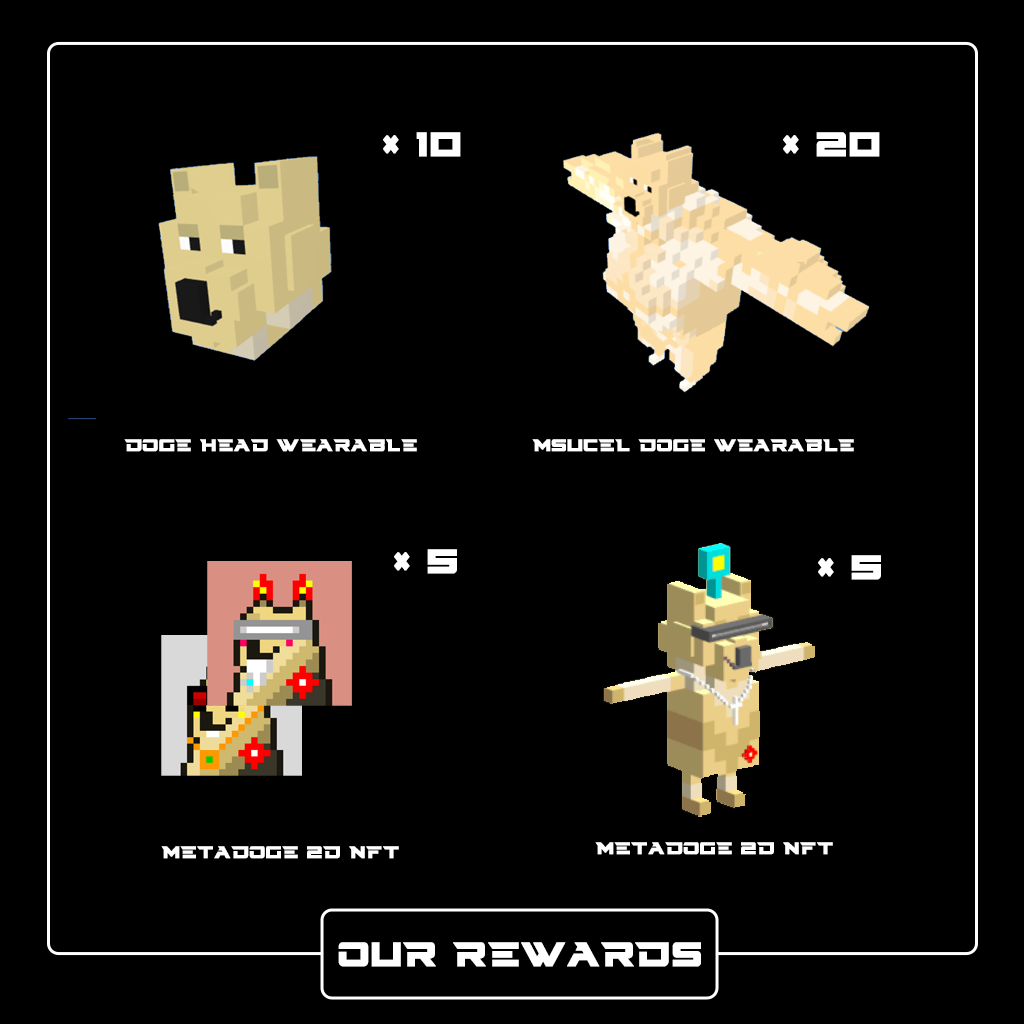
<style>
.page{position:relative;width:1024px;height:1024px;background:#000000}
.page>*{position:absolute;margin:0}
.t1{font:41.7px "CyberdyneCondensed";color:#ffffff;text-transform:uppercase;font-weight:bold}
.t2{font:20.8px "CyberdyneCondensed";color:#ffffff;text-transform:uppercase;font-weight:bold}
</style>
<div class="page">
<p class="t1" style="left:383px;top:132px;width:78px;height:25px">× 10</p>
<p class="t1" style="left:783px;top:132px;width:97px;height:25px">× 20</p>
<p class="t2" style="left:124px;top:439px;width:293px;height:13px">doge head wearable</p>
<p class="t2" style="left:532px;top:439px;width:322px;height:13px">msucel doge wearable</p>
<p class="t1" style="left:394px;top:549px;width:63px;height:25px">× 5</p>
<p class="t1" style="left:818px;top:555px;width:63px;height:25px">× 5</p>
<p class="t2" style="left:161px;top:846px;width:238px;height:13px">metadoge 2d nft</p>
<p class="t2" style="left:595px;top:842px;width:238px;height:13px">metadoge 2d nft</p>
<p class="t1" style="left:338px;top:942px;width:363px;height:25px">OUR REWARDS</p>
</div>
